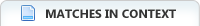
<style>
.page{position:relative;width:200px;height:26px;background:#ffffff}
.page>*{position:absolute;margin:0}
.t1{font:12px "Ebrima-Bold";color:#333333;text-transform:uppercase}
</style>
<div class="page">
<p class="t1" style="left:46px;top:9px;width:130px;height:9px">Matches In Context</p>
</div>
